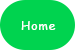
<style>
.page{position:relative;width:75px;height:50px;background:#00d34f}
.page>*{position:absolute;margin:0}
.t1{font:12px "ComicSansMS";letter-spacing:0.08em;color:#ffffff}
</style>
<div class="page">
<p class="t1" style="left:21px;top:21px;width:35px;height:9px">Home</p>
</div>
